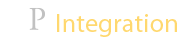
<style>
.page{position:relative;width:190px;height:48px;background:#ffffff}
.page>*{position:absolute;margin:0}
.t1{font:26.7px "MyriadPro-Regular";color:#ffd86f}
</style>
<div class="page">
<p class="t1" style="left:57px;top:14px;width:120px;height:23px">Integration</p>
</div>
